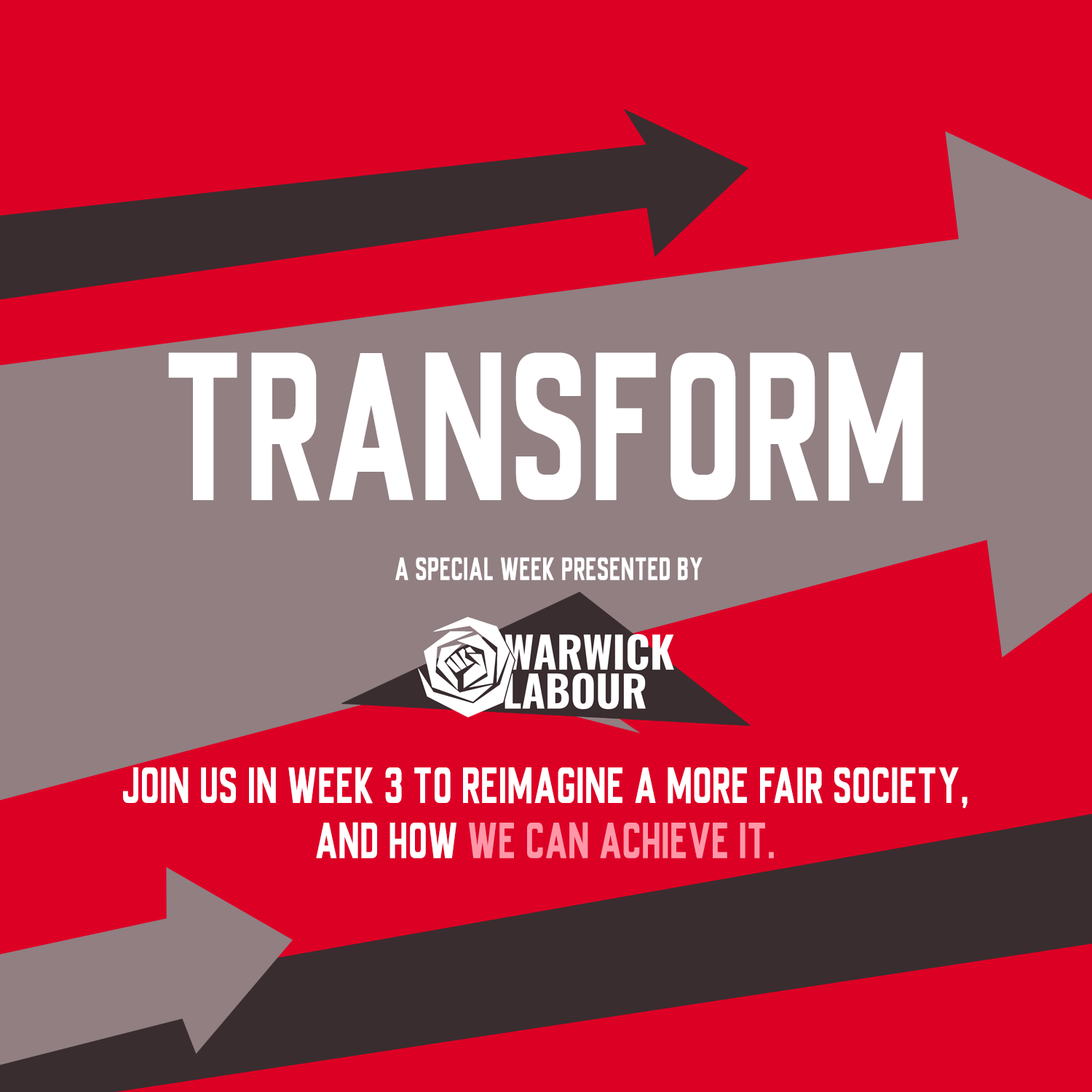
<style>
.page{position:relative;width:1092px;height:1092px;background:#dd0025}
.page>*{position:absolute;margin:0}
.t1{font:189.9px "UniversalKnowledge";color:#ffffff;scale:0.82 1}
.t2{font:29.1px "UniversalKnowledge";color:#ffffff;scale:0.82 1}
.t3{font:45.9px "UniversalKnowledge";color:#ffffff;scale:0.82 1}
.t4{font:45.9px "UniversalKnowledge";color:#ff97a8;scale:0.82 1}
</style>
<div class="page">
<p class="t1" style="left:168px;top:352px;width:755px;height:149px">TRANSFORM</p>
<p class="t2" style="left:395px;top:557px;width:308px;height:23px">A SPECIAL WEEK PRESENTED BY</p>
<p class="t3" style="left:123px;top:767px;width:844px;height:91px;text-align:center">JOIN US IN WEEK 3 TO REIMAGINE A MORE FAIR SOCIETY,<br>AND HOW <span class="t4">WE CAN ACHIEVE IT.</span></p>
</div>
